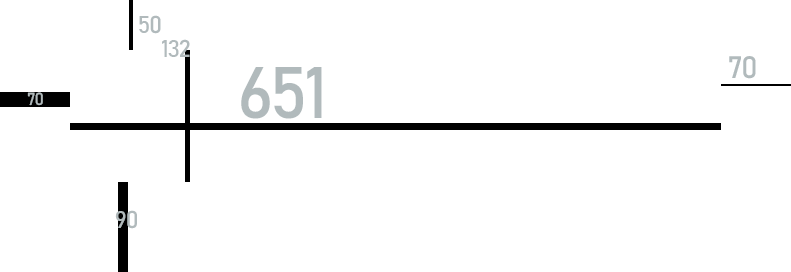
<style>
.page{position:relative;width:791px;height:272px;background:#ffffff}
.page>*{position:absolute;margin:0}
.t1{font:24px "Bahnschrift";letter-spacing:-0.06em;color:#b1babc}
.t2{font:30.5px "Bahnschrift";letter-spacing:-0.06em;color:#b1babc}
.t3{font:72px "Bahnschrift";letter-spacing:-0.06em;color:#b1babc}
.t4{font:17.3px "Bahnschrift";letter-spacing:-0.06em;color:#b1babc}
</style>
<div class="page">
<p class="t1" style="left:139px;top:15px;width:22px;height:19px">50</p>
<p class="t1" style="left:162px;top:39px;width:28px;height:18px">132</p>
<p class="t2" style="left:729px;top:56px;width:27px;height:23px">70</p>
<p class="t3" style="left:241px;top:67px;width:81px;height:52px">651</p>
<p class="t4" style="left:27px;top:92px;width:16px;height:14px">70</p>
</div>
